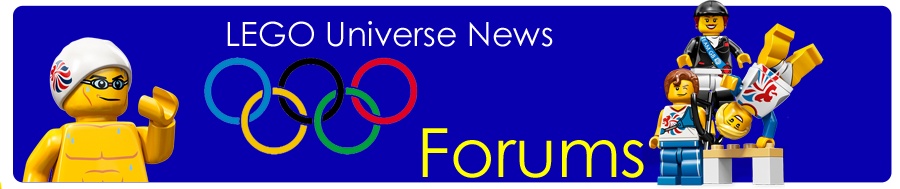
<style>
.page{position:relative;width:900px;height:189px;background:#0800ae}
.page>*{position:absolute;margin:0}
.t1{font:33.2px "CenturyGothic";color:#ffffff}
.t2{font:68px "CenturyGothic";color:#ffff00}
</style>
<div class="page">
<p class="t1" style="left:227px;top:21px;width:326px;height:26px">LEGO Universe News</p>
<p class="t2" style="left:422px;top:128px;width:222px;height:50px">Forums</p>
</div>
